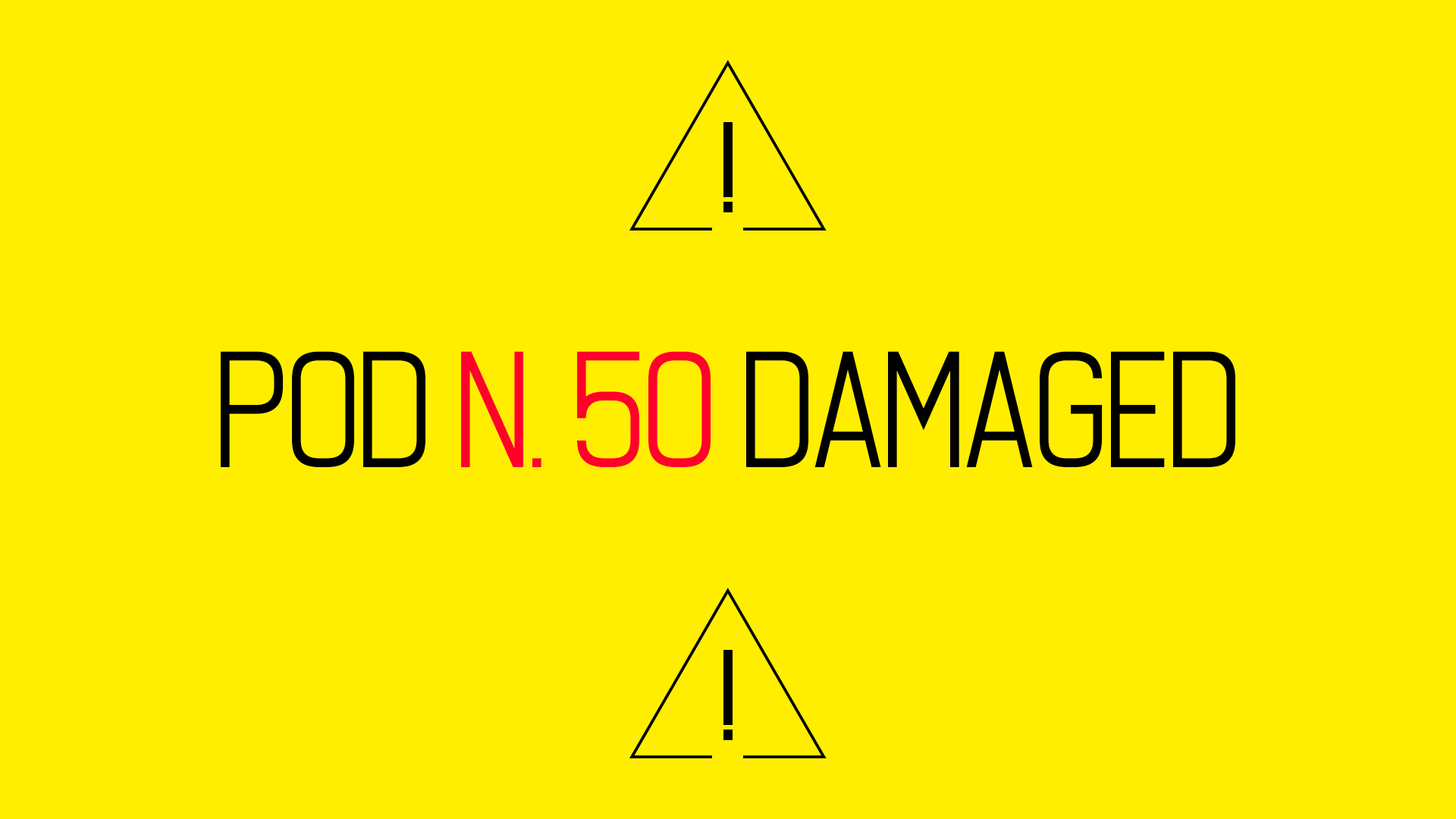
<style>
.page{position:relative;width:1456px;height:819px;background:#ffee00}
.page>*{position:absolute;margin:0}
.t1{font:182.2px "Asleepytiming";color:#000000}
.t2{font:182.2px "Asleepytiming";color:#ff002a}
</style>
<div class="page">
<p class="t1" style="left:221px;top:351px;width:1015px;height:116px">POD <span class="t2">N. 50</span> DAMAGED</p>
</div>
